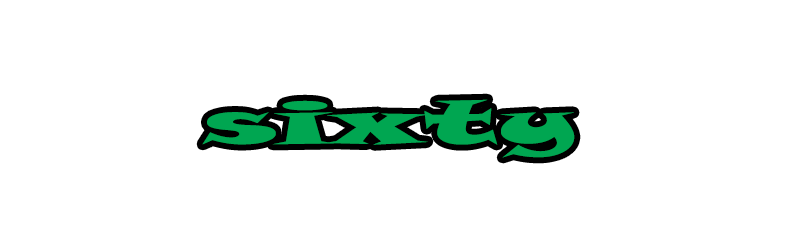
<style>
.page{position:relative;width:812px;height:249px;background:#ffffff}
.page>*{position:absolute;margin:0}
.t1{font:60px "SnapITC-Regular";color:#00a651;scale:2 1}
</style>
<div class="page">
<p class="t1" style="left:202px;top:99px;width:373px;height:59px">sixty</p>
</div>
